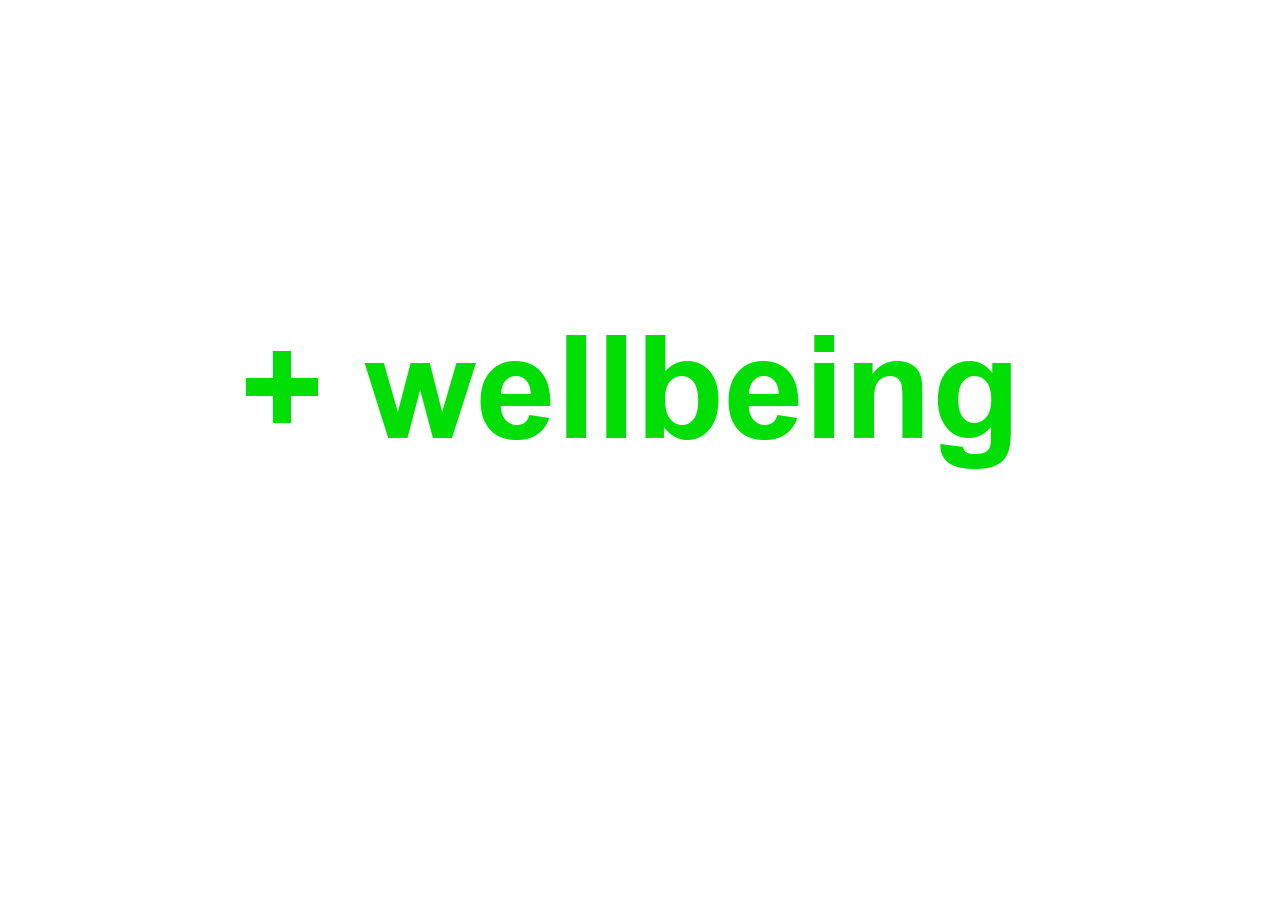
<style>
.page{position:relative;width:1280px;height:900px;background:#ffffff}
.page>*{position:absolute;margin:0}
.t1{font:144px "Arial-BoldMT";color:#01de06}
</style>
<div class="page">
<p class="t1" style="left:245px;top:335px;width:766px;height:134px">+ wellbeing</p>
</div>
